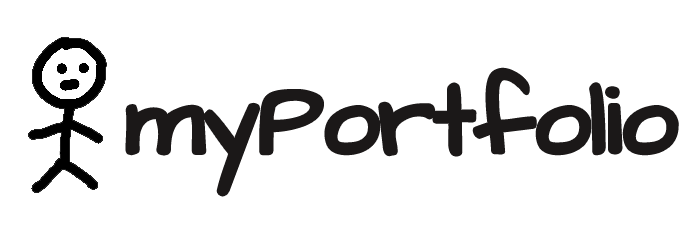
<style>
.page{position:relative;width:700px;height:240px;background:#ffffff}
.page>*{position:absolute;margin:0}
.t1{font:100px "ArchitectsDaughter-Regular";color:#1b1818}
</style>
<div class="page">
<p class="t1" style="left:128px;top:70px;width:548px;height:124px">myPortfolio</p>
</div>
